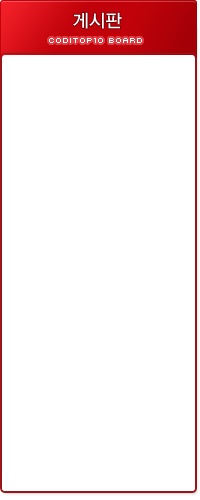
<style>
.page{position:relative;width:200px;height:500px;background:#ffffff}
.page>*{position:absolute;margin:0}
.t1{font:18px "YDIYGO330";color:#ffffff}
.t2{font:8px "Kroeger0554";color:#ffffff;text-transform:uppercase}
</style>
<div class="page">
<p class="t1" style="left:73px;top:12px;width:49px;height:17px">게시판</p>
<p class="t2" style="left:49px;top:38px;width:93px;height:5px">CODITOP10 board</p>
</div>
